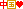
<style>
.page{position:relative;width:23px;height:9px;background:#ffffff}
.page>*{position:absolute;margin:0}
.t1{font:10px "MS-PGothic";letter-spacing:-0.18em;color:#ff0000;scale:0.95 1}
.t2{font:10px "MS-PGothic";letter-spacing:-0.18em;color:#d69700;scale:0.96 1}
.t3{font:11.7px "SegoeUI";color:#ff0000}
</style>
<div class="page">
<p class="t1" style="left:0px;top:0px;width:16px;height:9px">中<span class="t2">国</span></p>
<p class="t3" style="left:16px;top:1px;width:7px;height:7px">♥</p>
</div>
